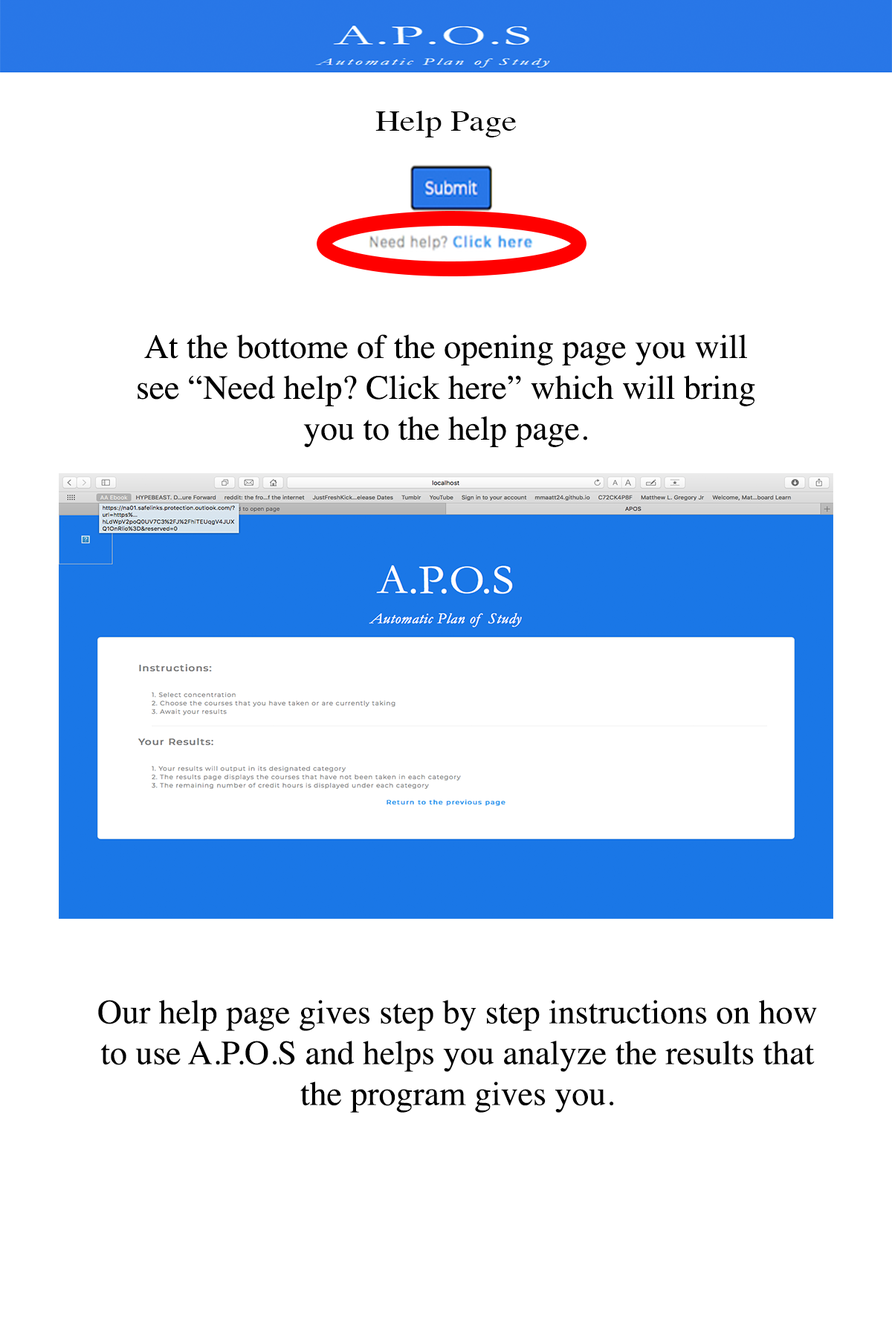
<style>
.page{position:relative;width:892px;height:1337px;background:#ffffff}
.page>*{position:absolute;margin:0}
.t1{font:29.1px "Times-Roman";color:#000000;scale:1.17 1}
.t2{font:34.1px "Times-Roman";color:#000000}
</style>
<div class="page">
<p class="t1" style="left:375px;top:111px;width:141px;height:26px">Help Page</p>
<p class="t2" style="left:137px;top:334px;width:618px;height:113px;text-align:center">At the bottome of the opening page you will see “Need help? Click here” which will bring you to the help page.</p>
<p class="t2" style="left:98px;top:1000px;width:719px;height:113px;text-align:center">Our help page gives step by step instructions on how to use A.P.O.S and helps you analyze the results that the program gives you.</p>
</div>
